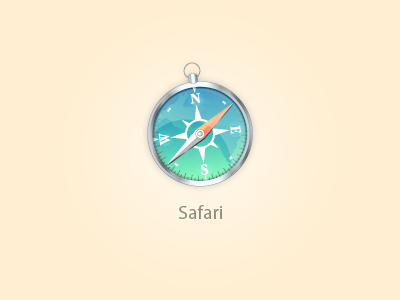
<style>
.page{position:relative;width:400px;height:300px;background:#ffeed1}
.page>*{position:absolute;margin:0}
.t1{font:19.4px "MyriadPro-Regular";color:#8c8d77}
</style>
<div class="page">
<p class="t1" style="left:179px;top:205px;width:43px;height:14px">Safari</p>
</div>
